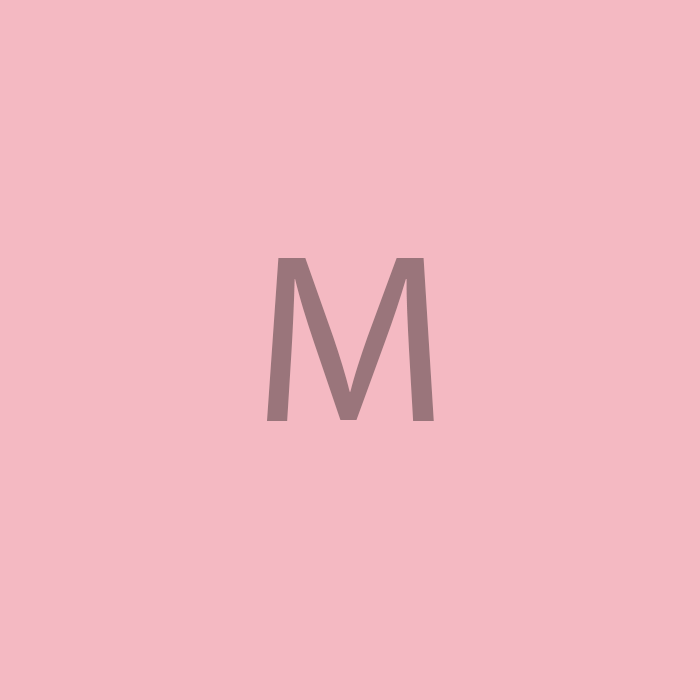
<style>
.page{position:relative;width:700px;height:700px;background:#f4b9c2}
.page>*{position:absolute;margin:0}
.t1{font:242.3px "MyriadPro-Regular";color:#9a757b}
</style>
<div class="page">
<p class="t1" style="left:267px;top:258px;width:167px;height:163px">M</p>
</div>
